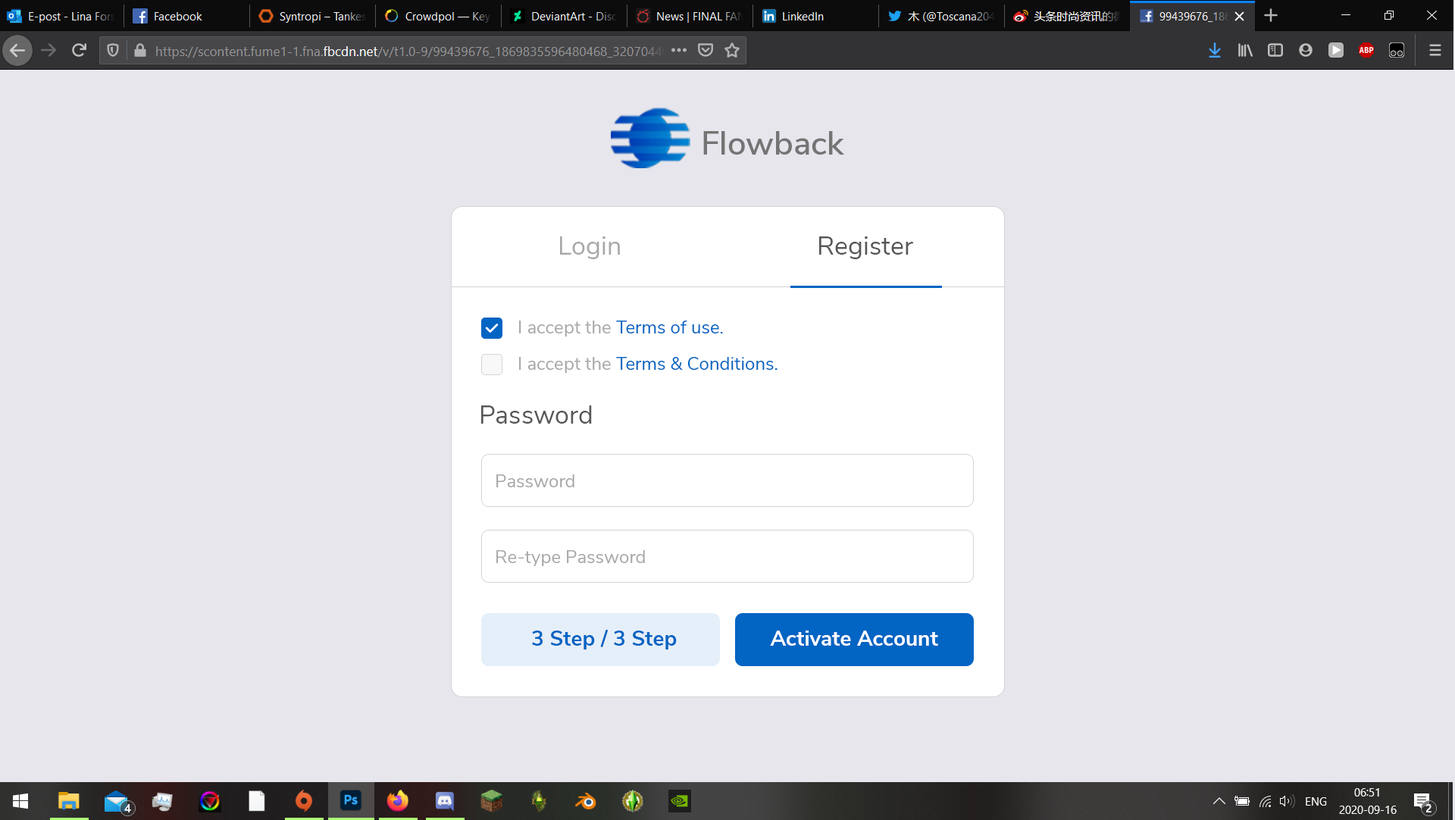
<style>
.page{position:relative;width:1455px;height:820px;background:#e7e6ed}
.page>*{position:absolute;margin:0}
.t1{font:33.2px "NunitoSans-SemiBold";color:#747474}
.t2{font:25.8px "NunitoSans-Regular";color:#a8a8a8}
.t3{font:25.8px "NunitoSans-Regular";color:#575757}
.t4{font:18.2px "NunitoSans-Regular";color:#0264c3}
.t5{font:18.2px "NunitoSans-Regular";color:#a8a8a8}
.t6{font:21.2px "NunitoSans-Bold";color:#0264c3}
.t7{font:21.2px "NunitoSans-Bold";color:#ffffff}
</style>
<div class="page">
<p class="t1" style="left:703px;top:131px;width:142px;height:24px">Flowback</p>
<p class="t2" style="left:560px;top:236px;width:60px;height:23px">Login</p>
<p class="t3" style="left:819px;top:236px;width:94px;height:23px">Register</p>
<p class="t4" style="left:519px;top:320px;width:204px;height:16px"><span class="t5">I accept the </span>Terms of use.</p>
<p class="t4" style="left:519px;top:357px;width:258px;height:16px"><span class="t5">I accept the </span>Terms &amp; Conditions.</p>
<p class="t3" style="left:481px;top:405px;width:111px;height:19px">Password</p>
<p class="t5" style="left:496px;top:474px;width:78px;height:13px">Password</p>
<p class="t5" style="left:496px;top:550px;width:149px;height:16px">Re-type Password</p>
<p class="t6" style="left:532px;top:629px;width:145px;height:20px">3 Step / 3 Step</p>
<p class="t7" style="left:770px;top:630px;width:168px;height:15px">Activate Account</p>
</div>
